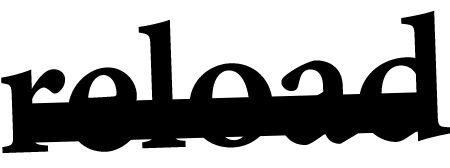
<style>
.page{position:relative;width:450px;height:168px;background:#ffffff}
.page>*{position:absolute;margin:0}
.t1{font:180px "MinionConceptRoman-Semibold";letter-spacing:-0.025em;color:#000000}
</style>
<div class="page">
<p class="t1" style="left:1px;top:10px;width:450px;height:143px;rotate:-2deg">reload</p>
</div>
